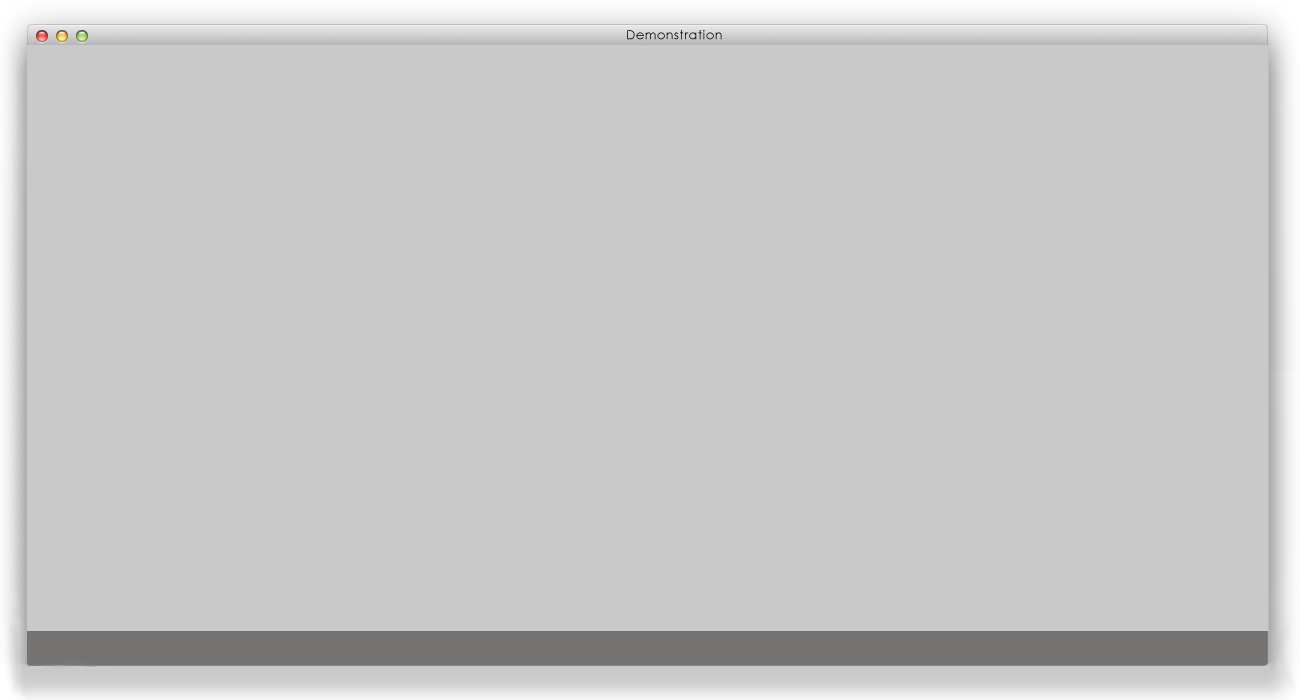
<style>
.page{position:relative;width:1300px;height:700px;background:#c9c9c9}
.page>*{position:absolute;margin:0}
.t1{font:12.5px "CenturyGothic";letter-spacing:0.05em;color:#000000}
</style>
<div class="page">
<p class="t1" style="left:627px;top:30px;width:95px;height:10px">Demonstration</p>
</div>
